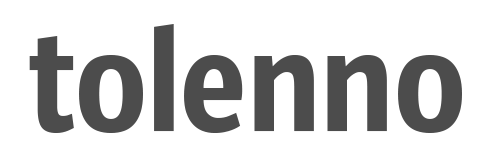
<style>
.page{position:relative;width:490px;height:156px;background:#ffffff}
.page>*{position:absolute;margin:0}
.t1{font:145px "SansusWebissimo";color:#4c4c4c}
</style>
<div class="page">
<p class="t1" style="left:29px;top:24px;width:433px;height:109px">tolenno</p>
</div>
